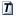
<style>
.page{position:relative;width:16px;height:16px;background:#ffffff}
.page>*{position:absolute;margin:0}
.t1{font:12px "Arial-BoldItalicMT";color:#000000}
</style>
<div class="page">
<p class="t1" style="left:3px;top:2px;width:8px;height:15px">T</p>
</div>
